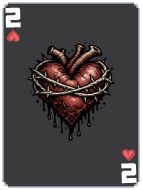
<style>
.page{position:relative;width:142px;height:190px;background:#3a3a3c}
.page>*{position:absolute;margin:0}
.t1{font:28.1px "Duplexide";color:#ffffff}
</style>
<div class="page">
<p class="t1" style="left:5px;top:7px;width:16px;height:21px;rotate:-2deg">2</p>
<p class="t1" style="left:121px;top:163px;width:16px;height:21px;rotate:-2deg">2</p>
</div>
